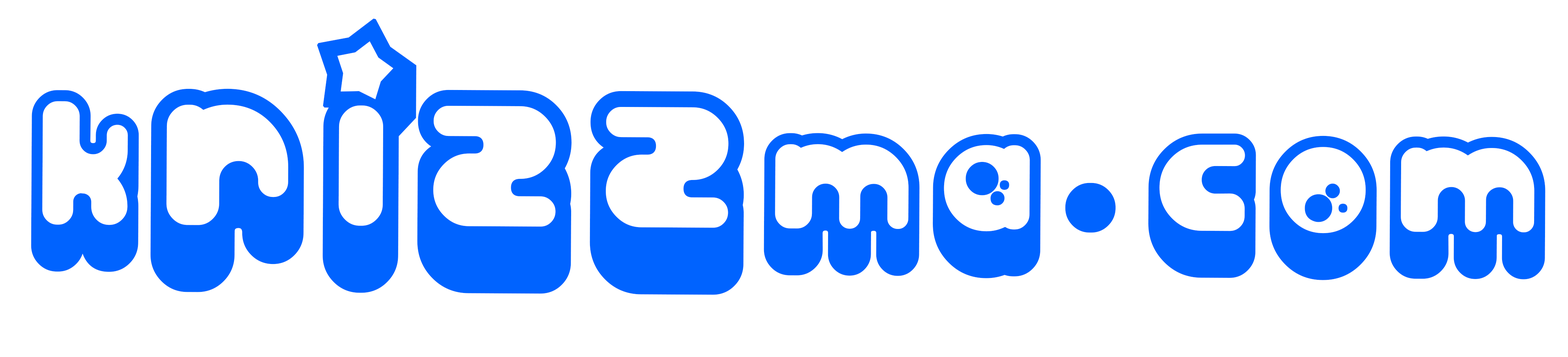
<style>
.page{position:relative;width:1568px;height:357px;background:#ffffff}
.page>*{position:absolute;margin:0}
.t1{font:256px "Billo";letter-spacing:0.12em;color:#0063ff;font-variant:small-caps;font-weight:bold}
</style>
<div class="page">
<p class="t1" style="left:31px;top:18px;width:1514px;height:277px">kRIZZma.com</p>
</div>
